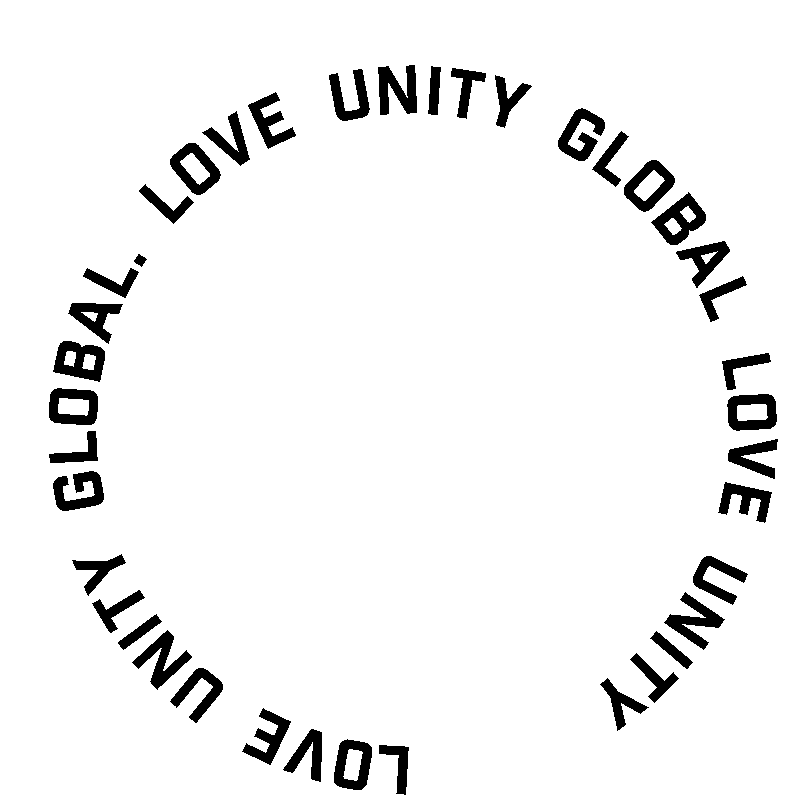
<style>
.page{position:relative;width:800px;height:800px;background:#ffffff}
.page>*{position:absolute;margin:0}
.t1{font:66.7px "IndustryInc-Base";color:#000000}
.t2{font:58.3px "IndustryInc-Base";color:#ff0098}
.t3{font:58.3px "Webdings";color:#ff0098}
</style>
<div class="page">
<p class="t1" style="left:49px;top:65px;width:729px;height:730px;text-align:center">l0ve  unity  global.  love  unity  global  love  unity   unity <span class="t2"> aaqw</span><span class="t3">s</span><span class="t2">erre</span><span class="t3">zdw</span><span class="t2">ww&lt;&lt;&lt;&lt;</span><span class="t3">d&lt;&lt;</span></p>
</div>
